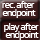
<style>
.page{position:relative;width:40px;height:40px}
.page>*{position:absolute;margin:0}
.t1{font:10.7px/8px "SimianText-Orangutan";letter-spacing:-0.05em;color:#ffffff}
</style>
<div class="page">
<p class="t1" style="left:2px;top:1px;width:34px;height:17px;text-align:center">rec. after <br>endpoint</p>
<p class="t1" style="left:4px;top:23px;width:35px;height:17px;text-align:center">play after <br>endpoint</p>
</div>
